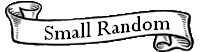
<style>
.page{position:relative;width:204px;height:52px;background:#ffffff}
.page>*{position:absolute;margin:0}
.t1{font:24px "Perpetua";color:#000000}
</style>
<div class="page">
<p class="t1" style="left:44px;top:16px;width:126px;height:24px">Small Random</p>
</div>
